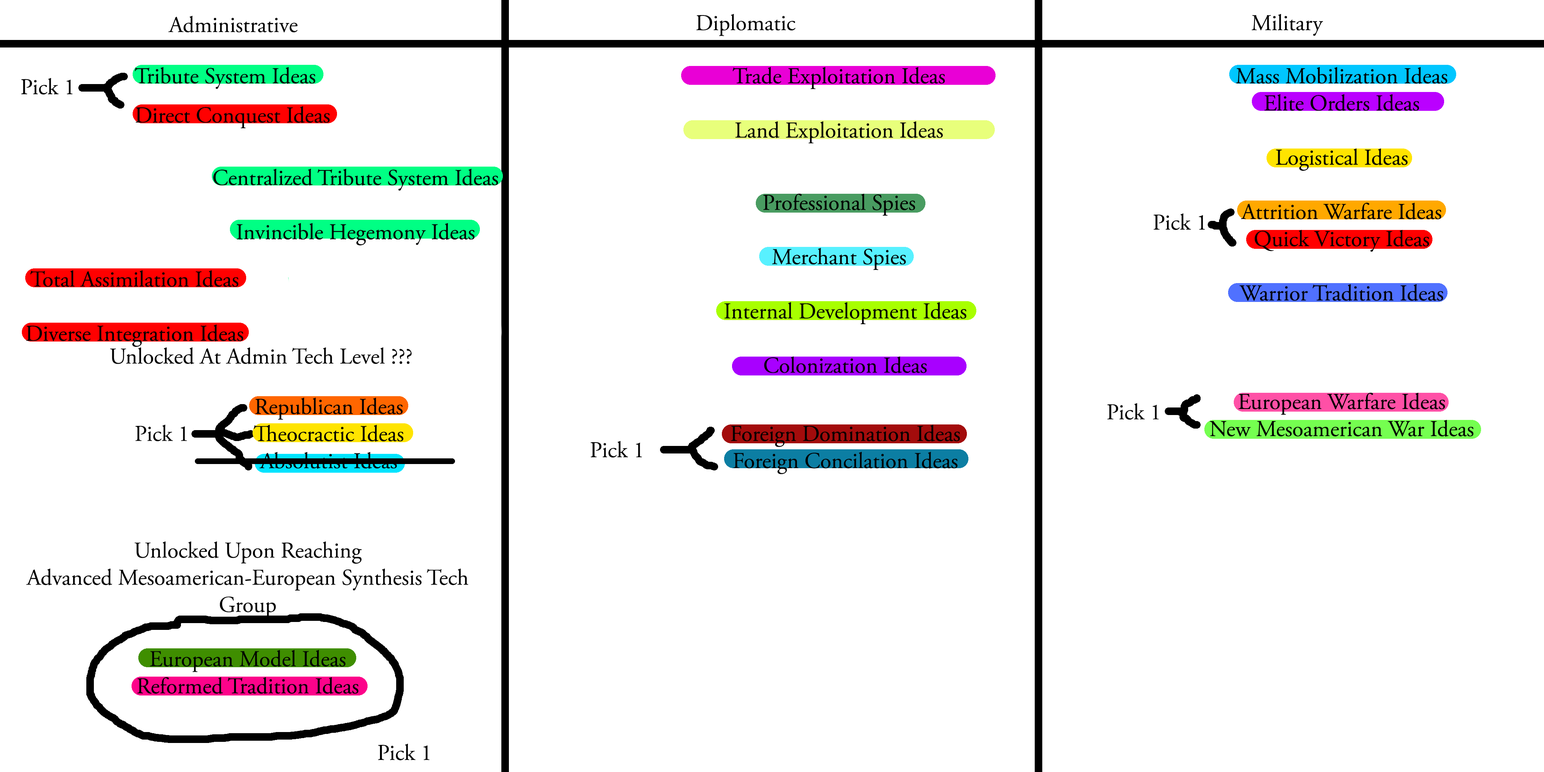
<style>
.page{position:relative;width:1544px;height:772px;background:#ffffff}
.page>*{position:absolute;margin:0}
.t1{font:22.6px "AGaramondPro-Regular";color:#000000}
</style>
<div class="page">
<p class="t1" style="left:168px;top:15px;width:130px;height:18px">Administrative</p>
<p class="t1" style="left:696px;top:14px;width:100px;height:22px">Diplomatic</p>
<p class="t1" style="left:1252px;top:14px;width:71px;height:22px">Military</p>
<p class="t1" style="left:21px;top:78px;width:52px;height:17px">Pick 1</p>
<p class="t1" style="left:135px;top:67px;width:181px;height:22px">Tribute System Ideas</p>
<p class="t1" style="left:733px;top:67px;width:212px;height:77px;text-align:center">Trade Exploitation Ideas<br><br>Land Exploitation Ideas</p>
<p class="t1" style="left:1210px;top:67px;width:264px;height:370px;text-align:center">Mass Mobilization Ideas<br>Elite Orders Ideas<br><br>Logistical Ideas<br><br>Attrition Warfare Ideas<br>Quick Victory Ideas<br><br>Warrior Tradition Ideas<br><br><br><br>European Warfare Ideas<br>New Mesoamerican War Ideas</p>
<p class="t1" style="left:136px;top:106px;width:194px;height:23px">Direct Conquest Ideas</p>
<p class="t1" style="left:213px;top:169px;width:285px;height:76px;text-align:center">Centralized Tribute System Ideas<br><br>Invincible Hegemony Ideas</p>
<p class="t1" style="left:763px;top:193px;width:152px;height:77px;text-align:center">Professional Spies<br><br>Merchant Spies</p>
<p class="t1" style="left:1154px;top:213px;width:51px;height:17px">Pick 1</p>
<p class="t1" style="left:26px;top:270px;width:218px;height:77px;text-align:center">Total Assimilation Ideas<br><br>Diverse Integration Ideas</p>
<p class="t1" style="left:725px;top:302px;width:242px;height:71px;text-align:center">Internal Development Ideas<br><br>Colonization Ideas</p>
<p class="t1" style="left:110px;top:347px;width:302px;height:17px">Unlocked At Admin Tech Level ???</p>
<p class="t1" style="left:254px;top:398px;width:149px;height:71px;text-align:center">Republican Ideas<br>Theocractic Ideas<br>Absolutist Ideas</p>
<p class="t1" style="left:1107px;top:403px;width:52px;height:17px">Pick 1</p>
<p class="t1" style="left:135px;top:425px;width:52px;height:16px">Pick 1</p>
<p class="t1" style="left:731px;top:425px;width:229px;height:49px;text-align:center">Foreign Domination Ideas<br>Foreign Concilation Ideas</p>
<p class="t1" style="left:591px;top:441px;width:51px;height:17px">Pick 1</p>
<p class="t1" style="left:26px;top:541px;width:443px;height:153px;text-align:center">Unlocked Upon Reaching<br>Advanced Mesoamerican-European Synthesis Tech Group<br><br>European Model Ideas<br>Reformed Tradition Ideas</p>
<p class="t1" style="left:378px;top:744px;width:51px;height:16px">Pick 1</p>
</div>
